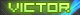
<style>
.page{position:relative;width:80px;height:15px}
.page>*{position:absolute;margin:0}
.t1{font:18px "VisitorTT1BRK";letter-spacing:-0.01em;color:#d1fa7f;scale:1.1 1}
</style>
<div class="page">
<p class="t1" style="left:8px;top:3px;width:62px;height:9px">Victor</p>
</div>
